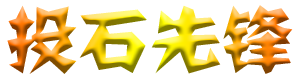
<style>
.page{position:relative;width:300px;height:80px;background:#ffffff}
.page>*{position:absolute;margin:0}
.t1{font:72px "JJianzi"}
</style>
<div class="page">
<p class="t1" style="left:7px;top:5px;width:286px;height:69px">投石先锋</p>
</div>
